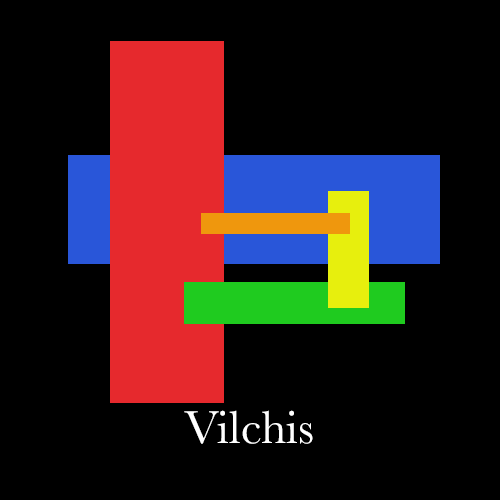
<style>
.page{position:relative;width:500px;height:500px;background:#000000}
.page>*{position:absolute;margin:0}
.t1{font:48px "Baskerville";color:#ffffff}
</style>
<div class="page">
<p class="t1" style="left:184px;top:410px;width:129px;height:34px">Vilchis</p>
</div>
